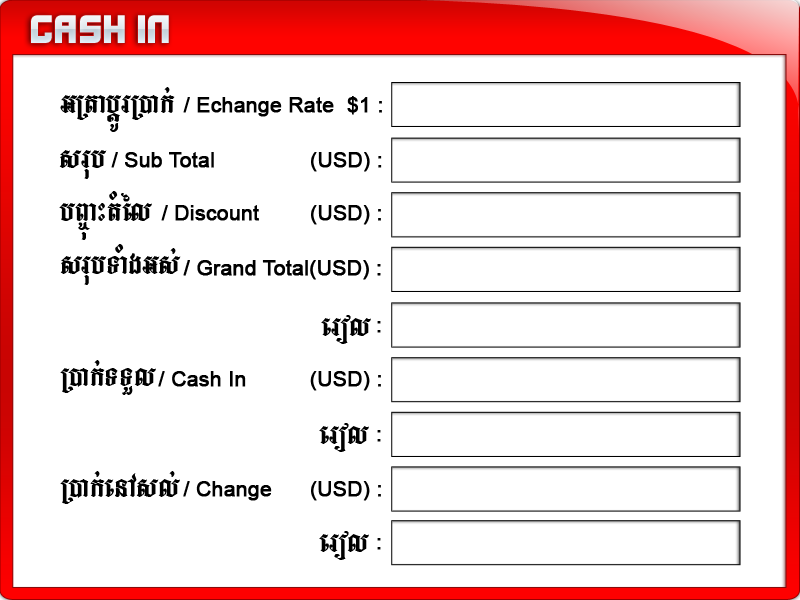
<style>
.page{position:relative;width:800px;height:600px;background:#ffffff}
.page>*{position:absolute;margin:0}
.t1{font:35.5px "Xifiction";color:#e1eaf0}
.t2{font:47.4px "LimonF3";color:#000000}
.t3{font:20.7px "ArialMT";color:#000000;font-weight:bold}
</style>
<div class="page">
<p class="t1" style="left:31px;top:15px;width:138px;height:28px">CASH IN</p>
<p class="t2" style="left:60px;top:87px;width:115px;height:45px">GRtabþÚrR)ak;</p>
<p class="t3" style="left:183px;top:96px;width:199px;height:21px">/ Echange Rate  $1 :</p>
<p class="t2" style="left:59px;top:150px;width:48px;height:29px">srub</p>
<p class="t3" style="left:111px;top:152px;width:271px;height:20px">/ Sub Total               (USD) :</p>
<p class="t2" style="left:59px;top:191px;width:93px;height:49px">bB©úaHtMél</p>
<p class="t3" style="left:161px;top:205px;width:220px;height:20px">/ Discount        (USD) :</p>
<p class="t2" style="left:60px;top:244px;width:121px;height:41px">srubTaMgGs;</p>
<p class="t3" style="left:183px;top:260px;width:198px;height:20px">/ Grand Total(USD) :</p>
<p class="t2" style="left:321px;top:315px;width:50px;height:29px">erol</p>
<p class="t3" style="left:377px;top:321px;width:4px;height:12px">:</p>
<p class="t2" style="left:60px;top:360px;width:96px;height:35px">R)ak;TTYl</p>
<p class="t3" style="left:158px;top:371px;width:223px;height:20px">/ Cash In          (USD) :</p>
<p class="t2" style="left:319px;top:423px;width:50px;height:29px">erol</p>
<p class="t3" style="left:377px;top:430px;width:4px;height:12px">:</p>
<p class="t2" style="left:60px;top:471px;width:120px;height:33px">R)ak;enAsl;</p>
<p class="t3" style="left:183px;top:481px;width:198px;height:20px">/ Change      (USD) :</p>
<p class="t2" style="left:319px;top:531px;width:50px;height:29px">erol</p>
<p class="t3" style="left:377px;top:538px;width:4px;height:12px">:</p>
</div>
